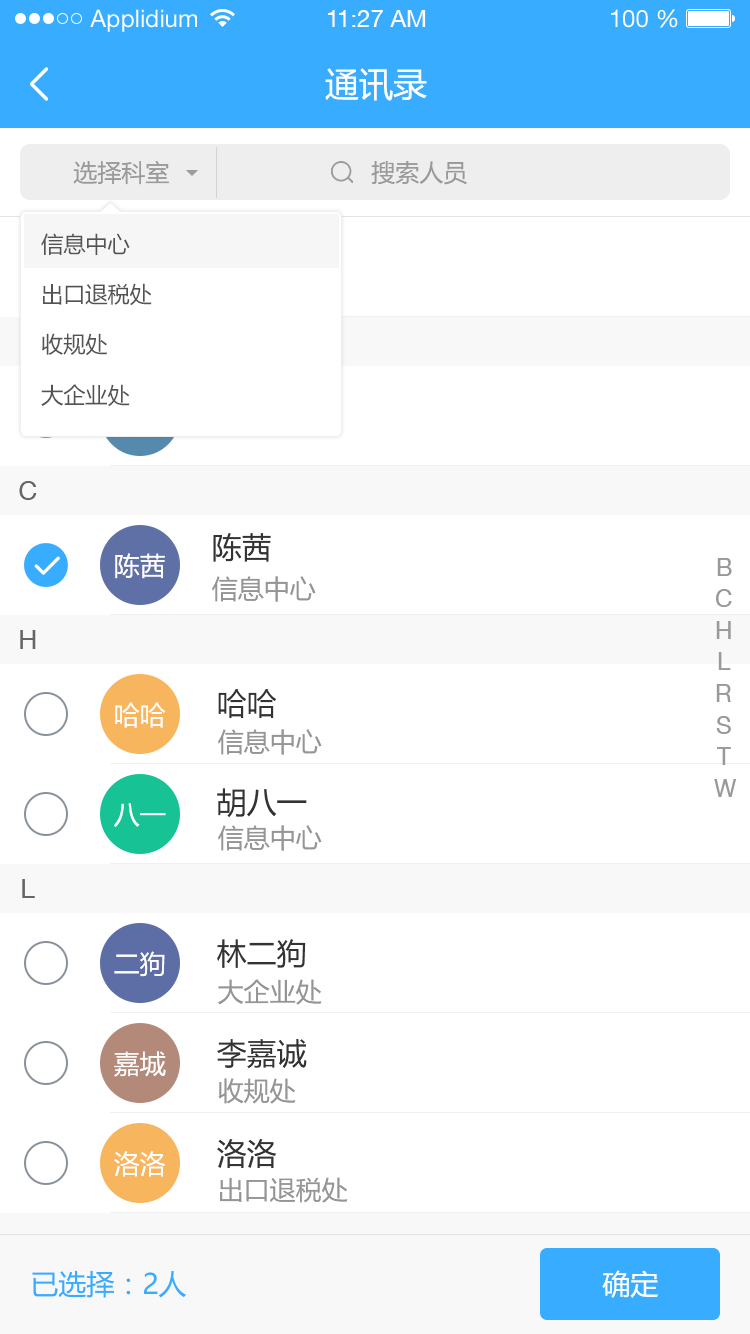
<style>
.page{position:relative;width:750px;height:1334px;background:#ffffff}
.page>*{position:absolute;margin:0}
.t1{font:24px "HelveticaNeueLTStd-Roman";color:#ffffff}
.t2{font:24px "HelveticaNeueCE-Roman";color:#ffffff}
.t3{font:34px "MicrosoftYaHei";color:#ffffff}
.t4{font:24px "MicrosoftYaHei";color:#999999}
.t5{font:22.2px "MicrosoftYaHei";color:#535353;text-transform:uppercase}
.t6{font:26px "HelveticaNeueLTPro-Roman";color:#666666}
.t7{font:30px "MicrosoftYaHei";color:#333333}
.t8{font:26px "MicrosoftYaHei";color:#fffefe}
.t9{font:24px "HelveticaNeueLTPro-Roman";color:#999999}
.t10{font:26px "MicrosoftYaHei";color:#959595}
.t11{font:28px "MicrosoftYaHei";color:#38adff}
.t12{font:28px "MicrosoftYaHei";color:#ffffff}
</style>
<div class="page">
<p class="t1" style="left:90px;top:9px;width:107px;height:23px">Applidium</p>
<p class="t2" style="left:328px;top:10px;width:98px;height:17px">11:27 AM</p>
<p class="t1" style="left:611px;top:9px;width:67px;height:19px">100 %</p>
<p class="t3" style="left:325px;top:68px;width:102px;height:33px">通讯录</p>
<p class="t4" style="left:73px;top:161px;width:96px;height:24px">选择科室</p>
<p class="t4" style="left:371px;top:161px;width:96px;height:24px">搜索人员</p>
<p class="t5" style="left:41px;top:233px;width:89px;height:22px">信息中心</p>
<p class="t5" style="left:43px;top:283px;width:109px;height:23px">出口退税处</p>
<p class="t5" style="left:41px;top:333px;width:67px;height:23px">收规处</p>
<p class="t5" style="left:41px;top:384px;width:89px;height:23px">大企业处</p>
<p class="t6" style="left:19px;top:481px;width:18px;height:19px">C</p>
<p class="t7" style="left:213px;top:533px;width:58px;height:29px">陈茜</p>
<p class="t8" style="left:115px;top:553px;width:50px;height:26px">陈茜</p>
<p class="t9" style="left:717px;top:558px;width:15px;height:18px">B</p>
<p class="t10" style="left:212px;top:576px;width:104px;height:26px">信息中心</p>
<p class="t9" style="left:716px;top:589px;width:16px;height:18px">C</p>
<p class="t6" style="left:20px;top:630px;width:16px;height:19px">H</p>
<p class="t9" style="left:716px;top:621px;width:15px;height:18px">H</p>
<p class="t9" style="left:718px;top:652px;width:13px;height:18px">L</p>
<p class="t7" style="left:218px;top:689px;width:58px;height:29px">哈哈</p>
<p class="t9" style="left:716px;top:684px;width:15px;height:18px">R</p>
<p class="t8" style="left:115px;top:702px;width:51px;height:26px">哈哈</p>
<p class="t9" style="left:716px;top:716px;width:15px;height:18px">S</p>
<p class="t10" style="left:218px;top:729px;width:104px;height:26px">信息中心</p>
<p class="t9" style="left:717px;top:747px;width:14px;height:18px">T</p>
<p class="t9" style="left:714px;top:779px;width:22px;height:18px">W</p>
<p class="t7" style="left:217px;top:788px;width:90px;height:30px">胡八一</p>
<p class="t8" style="left:114px;top:803px;width:52px;height:24px">八一</p>
<p class="t10" style="left:218px;top:825px;width:104px;height:26px">信息中心</p>
<p class="t6" style="left:22px;top:879px;width:13px;height:19px">L</p>
<p class="t7" style="left:217px;top:939px;width:89px;height:29px">林二狗</p>
<p class="t8" style="left:114px;top:951px;width:51px;height:26px">二狗</p>
<p class="t10" style="left:218px;top:979px;width:104px;height:26px">大企业处</p>
<p class="t7" style="left:217px;top:1039px;width:90px;height:30px">李嘉诚</p>
<p class="t8" style="left:114px;top:1051px;width:52px;height:26px">嘉城</p>
<p class="t10" style="left:218px;top:1078px;width:78px;height:26px">收规处</p>
<p class="t7" style="left:217px;top:1139px;width:60px;height:29px">洛洛</p>
<p class="t8" style="left:114px;top:1151px;width:52px;height:26px">洛洛</p>
<p class="t10" style="left:220px;top:1177px;width:128px;height:26px">出口退税处</p>
<p class="t11" style="left:32px;top:1270px;width:154px;height:28px">已选择：2人</p>
<p class="t12" style="left:602px;top:1270px;width:56px;height:28px">确定</p>
</div>
